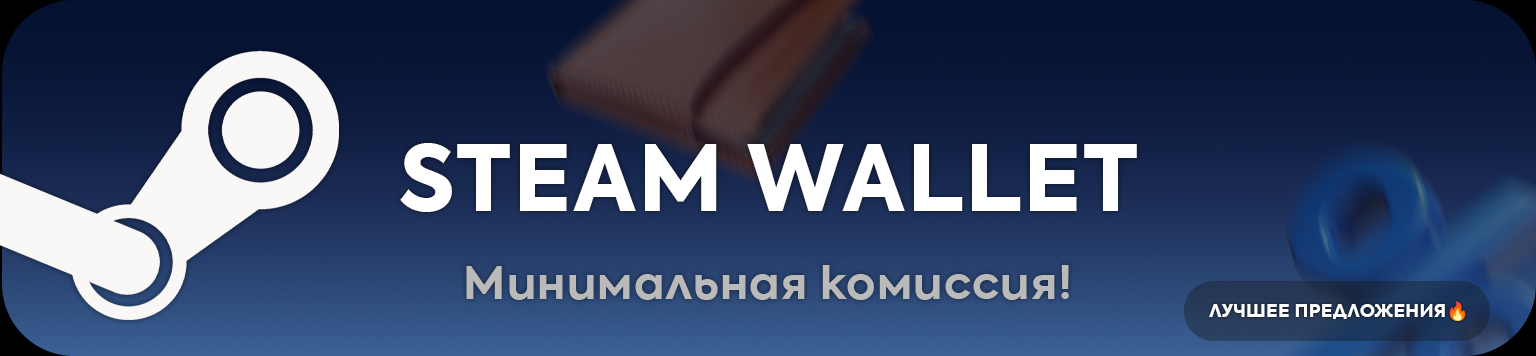
<style>
.page{position:relative;width:1536px;height:356px}
.page>*{position:absolute;margin:0}
.t1{font:90px "Axiforma-ExtraBold";letter-spacing:0.02em;color:#ffffff}
.t2{font:45.4px "Axiforma-Bold";letter-spacing:0.02em;color:#bbbaba}
.t3{font:17.8px "Axiforma-ExtraBold";letter-spacing:0.02em;color:#ffffff}
.t4{font:17.8px "NotoColorEmoji-SVG";letter-spacing:0.02em;color:#ffffff}
</style>
<div class="page">
<p class="t1" style="left:400px;top:143px;width:737px;height:69px">STEAM WALLET</p>
<p class="t2" style="left:466px;top:265px;width:603px;height:35px">Минимальная комиссия!</p>
<p class="t3" style="left:1209px;top:301px;width:257px;height:21px">ЛУЧШЕЕ ПРЕДЛОЖЕНИЯ<span class="t4">🔥</span></p>
</div>
